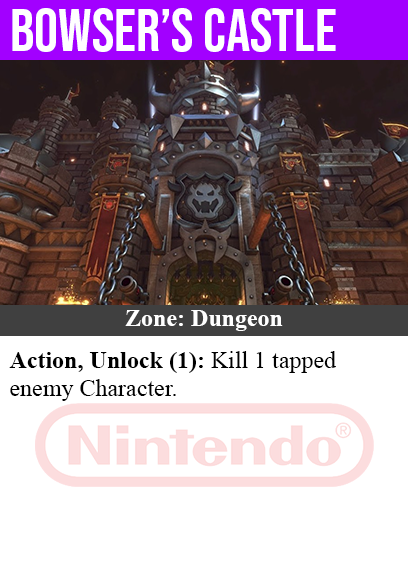
<style>
.page{position:relative;width:408px;height:585px;background:#ffffff}
.page>*{position:absolute;margin:0}
.t1{font:60px "BebasNeue-Regular";color:#ffffff}
.t2{font:24px "TimesNewRomanPS-BoldMT";color:#ffffff}
.t3{font:24px "TimesNewRomanPSMT";color:#000000}
.t4{font:24px "TimesNewRomanPS-BoldMT";color:#000000}
</style>
<div class="page">
<p class="t1" style="left:12px;top:8px;width:324px;height:44px">bowser’s castle</p>
<p class="t2" style="left:125px;top:310px;width:158px;height:21px">Zone: Dungeon</p>
<p class="t3" style="left:9px;top:351px;width:327px;height:50px"><span class="t4">Action, Unlock (1):</span> Kill 1 tapped<br>enemy Character.</p>
</div>
